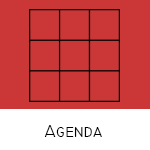
<style>
.page{position:relative;width:150px;height:150px;background:#cb3737}
.page>*{position:absolute;margin:0}
.t1{font:18px "Technic";color:#000000}
</style>
<div class="page">
<p class="t1" style="left:44px;top:125px;width:58px;height:12px">Agenda</p>
</div>
